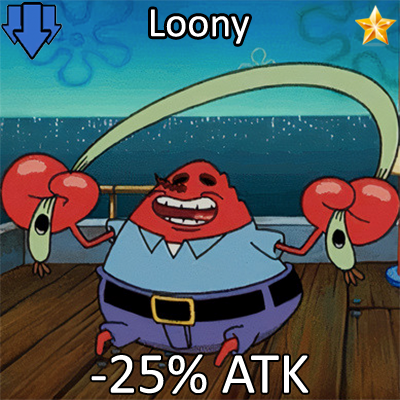
<style>
.page{position:relative;width:400px;height:400px}
.page>*{position:absolute;margin:0}
.t1{font:72px "Calibri";color:#ffffff}
.t2{font:100px "Calibri";color:#ffffff}
</style>
<div class="page">
<p class="t1" style="left:151px;top:9px;width:98px;height:35px">Loony</p>
<p class="t2" style="left:91px;top:354px;width:218px;height:40px">-25% ATK</p>
</div>
